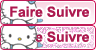
<style>
.page{position:relative;width:96px;height:50px;background:#ffffff}
.page>*{position:absolute;margin:0}
.t1{font:14px "Arial-BoldMT";color:#ad194f}
</style>
<div class="page">
<p class="t1" style="left:10px;top:6px;width:79px;height:11px">Faire Suivre</p>
<p class="t1" style="left:10px;top:31px;width:79px;height:11px">Faire Suivre</p>
</div>
